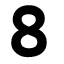
<style>
.page{position:relative;width:64px;height:64px;background:#ffffff}
.page>*{position:absolute;margin:0}
.t1{font:66.7px "(ÇÑ)°¢¸Ó¸®D";color:#000000}
</style>
<div class="page">
<p class="t1" style="left:11px;top:5px;width:36px;height:53px">8</p>
</div>
